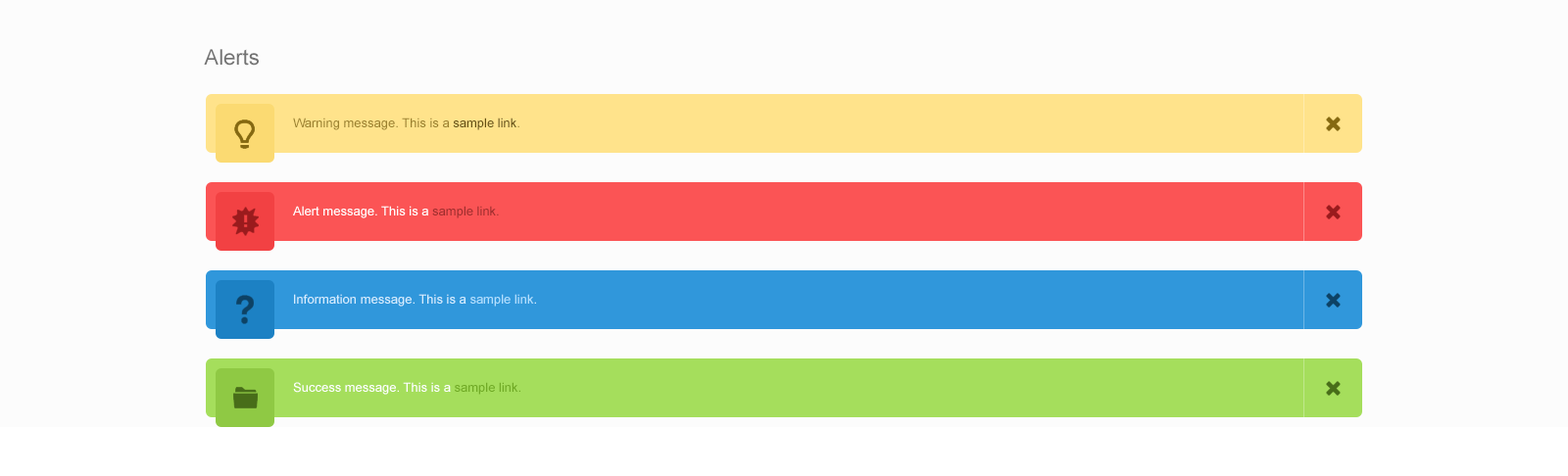
<style>
.page{position:relative;width:1568px;height:476px;background:#fcfcfc}
.page>*{position:absolute;margin:0}
.t1{font:21.6px "ArialMT";color:#737373}
.t2{font:12.7px "ArialMT";color:#9b812e}
.t3{font:12.7px "ArialMT";color:#645012}
.t4{font:12.7px "ArialMT";color:#ffffff}
.t5{font:12.7px "ArialMT";color:#9f2e2e}
.t6{font:12.7px "ArialMT";color:#d5eeff}
.t7{font:12.7px "ArialMT";color:#b1e0ff}
.t8{font:12.7px "ArialMT";color:#70aa25}
</style>
<div class="page">
<p class="t1" style="left:204px;top:49px;width:55px;height:17px">Alerts</p>
<p class="t2" style="left:293px;top:118px;width:226px;height:12px">Warning message. This is a <span class="t3">sample link</span>.</p>
<p class="t4" style="left:293px;top:206px;width:206px;height:13px">Alert message. This is a <span class="t5">sample link.</span></p>
<p class="t6" style="left:294px;top:294px;width:242px;height:13px">Information message. This is a <span class="t7">sample link</span>.</p>
<p class="t4" style="left:293px;top:382px;width:227px;height:13px">Success message. This is a <span class="t8">sample link.</span></p>
</div>
